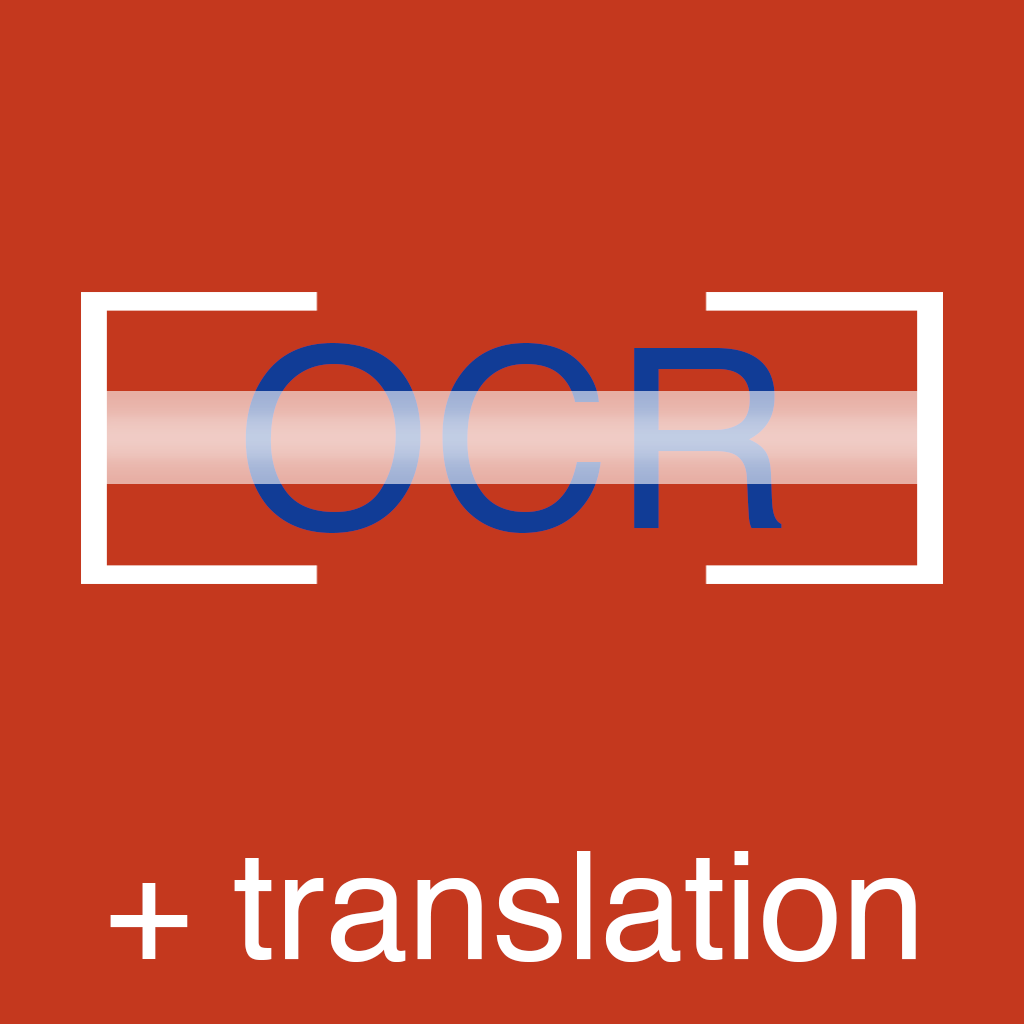
<style>
.page{position:relative;width:1024px;height:1024px;background:#c4381e}
.page>*{position:absolute;margin:0}
.t1{font:250px "Helvetica"}
.t2{font:150px "Helvetica";color:#ffffff}
</style>
<div class="page">
<p class="t1" style="left:245px;top:343px;width:537px;height:190px">OCR</p>
<p class="t2" style="left:110px;top:851px;width:806px;height:111px">+ translation</p>
</div>
